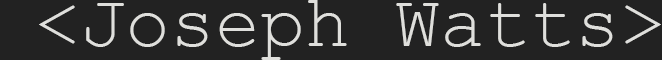
<style>
.page{position:relative;width:662px;height:60px;background:#222222}
.page>*{position:absolute;margin:0}
.t1{font:75px "CourierNewPSMT";color:#dfdfdc}
</style>
<div class="page">
<p class="t1" style="left:39px;top:0px;width:622px;height:60px">&lt;Joseph Watts&gt;</p>
</div>
